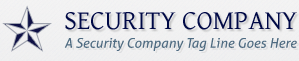
<style>
.page{position:relative;width:299px;height:61px}
.page>*{position:absolute;margin:0}
.t1{font:26.9px "GentiumBasic";color:#09173e}
.t2{font:13.5px "Aller-Italic";color:#556c7b}
</style>
<div class="page">
<p class="t1" style="left:65px;top:11px;width:232px;height:19px">SECURITY COMPANY</p>
<p class="t2" style="left:64px;top:38px;width:233px;height:13px">A Security Company Tag Line Goes Here</p>
</div>
